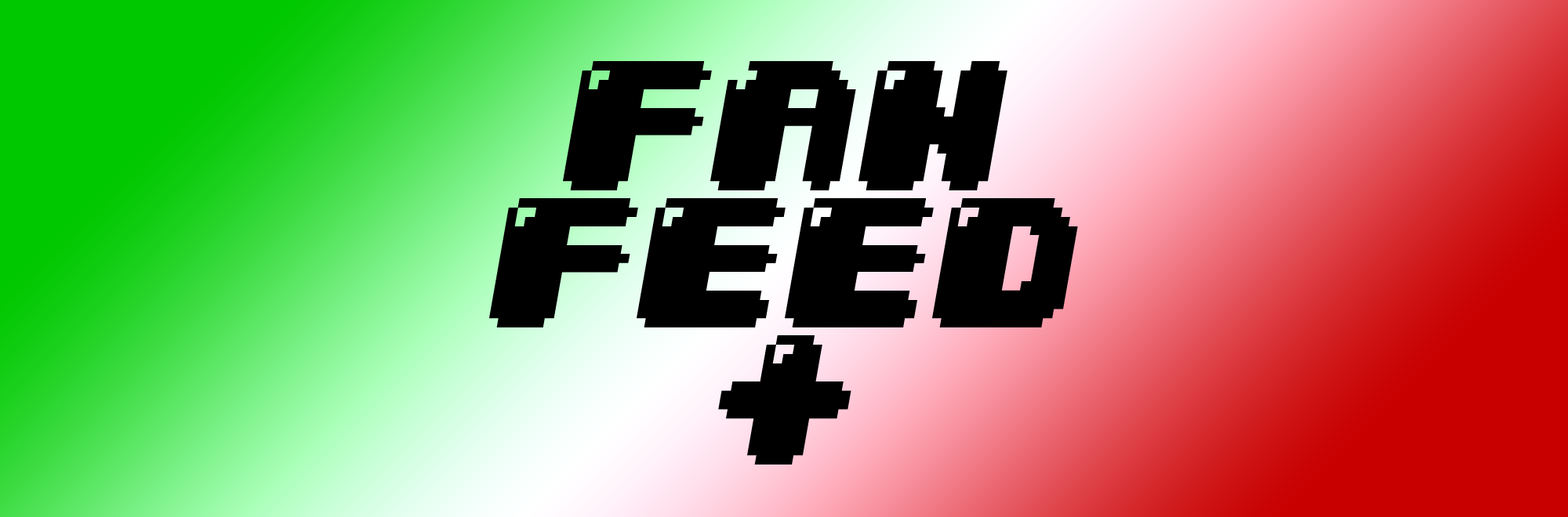
<style>
.page{position:relative;width:1568px;height:517px}
.page>*{position:absolute;margin:0}
.t1{font:156.8px/137.2px "04b30";color:#000000;font-style:italic}
</style>
<div class="page">
<p class="t1" style="left:489px;top:61px;width:589px;height:404px;text-align:justify">FAN<br>FEED<br>+</p>
</div>
